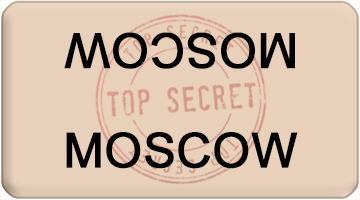
<style>
.page{position:relative;width:360px;height:200px;background:#e8d0bb}
.page>*{position:absolute;margin:0}
.t1{font:48px "ArialMT";color:#000000;font-weight:bold}
</style>
<div class="page">
<p class="t1" style="left:64px;top:32px;width:231px;height:37px;rotate:180deg">MOSCOW</p>
<p class="t1" style="left:66px;top:132px;width:232px;height:37px">MOSCOW</p>
</div>
